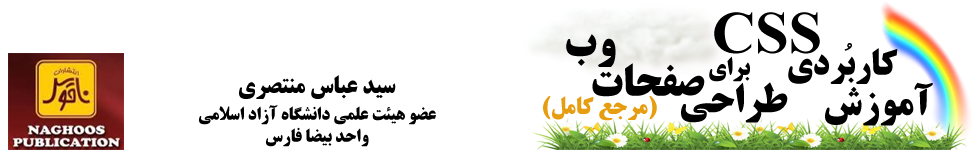
<style>
.page{position:relative;width:980px;height:160px;background:#ffffff}
.page>*{position:absolute;margin:0}
.t1{font:60px "TimesNewRomanPS-BoldMT";color:#000000}
.t2{font:44px "BTitrBold";color:#000000}
.t3{font:36px "BTitrBold";color:#000000}
.t4{font:25px "BTitrBold";color:#000000}
.t5{font:24px "BTitrBold";color:#000000}
.t6{font:40px "BTitrBold";color:#000000}
.t7{font:24px "BTitrBold";color:#e69d11}
.t8{font:18px "BTitrBold";color:#000000}
.t9{font:18px "TitrBold";color:#000000}
</style>
<div class="page">
<p class="t1" style="left:714px;top:12px;width:106px;height:42px">CSS</p>
<p class="t2" style="left:566px;top:34px;width:50px;height:33px">وب</p>
<p class="t3" style="left:788px;top:48px;width:110px;height:36px">کاربردي</p>
<p class="t3" style="left:844px;top:43px;width:8px;height:8px">ُ</p>
<p class="t2" style="left:592px;top:63px;width:113px;height:34px">صفحات</p>
<p class="t4" style="left:709px;top:56px;width:41px;height:26px">براي</p>
<p class="t5" style="left:239px;top:75px;width:157px;height:24px">سيد عباس منتصري</p>
<p class="t6" style="left:681px;top:82px;width:107px;height:41px">طراحي</p>
<p class="t6" style="left:825px;top:82px;width:108px;height:44px">آموزش</p>
<p class="t7" style="left:543px;top:96px;width:114px;height:25px">(مرجع کامل)</p>
<p class="t8" style="left:199px;top:105px;width:237px;height:20px">عضو هيئت علمي دانشگاه آزاد اسلامي</p>
<p class="t9" style="left:266px;top:127px;width:103px;height:20px">واحد بيضا فارس</p>
</div>
